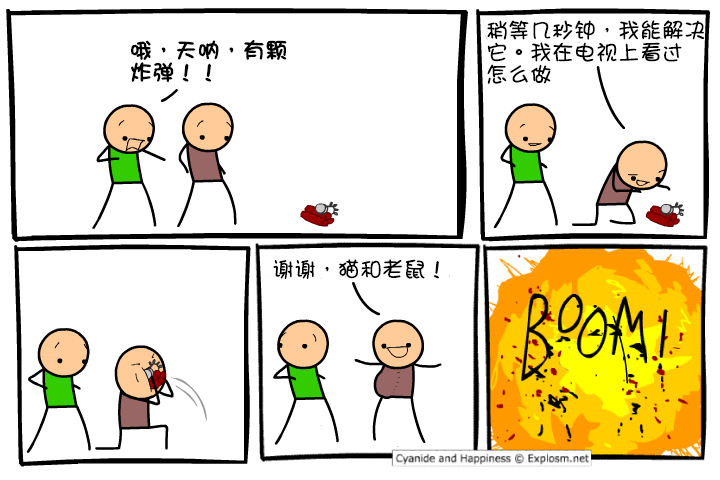
<style>
.page{position:relative;width:720px;height:480px;background:#ffffff}
.page>*{position:absolute;margin:0}
.t1{font:22px/22px "DFGirl";color:#000000}
.t2{font:22px/22px "DFGirl";color:#000000;font-weight:bold}
.t3{font:22px "DFGirl";color:#000000}
</style>
<div class="page">
<p class="t1" style="left:487px;top:20px;width:218px;height:64px">稍等几秒钟，我能解决<br>它。我在电视上看过<br>怎么做</p>
<p class="t2" style="left:131px;top:40px;width:156px;height:43px">哦，天呐，有颗<br>炸弹！！</p>
<p class="t3" style="left:273px;top:259px;width:167px;height:20px">谢谢，猫和老鼠！</p>
</div>
